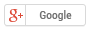
<style>
.page{position:relative;width:90px;height:30px;background:#ffffff}
.page>*{position:absolute;margin:0}
.t1{font:10px "Roboto-Medium";letter-spacing:0.01em;color:#737373}
</style>
<div class="page">
<p class="t1" style="left:39px;top:10px;width:33px;height:11px">Google</p>
</div>
